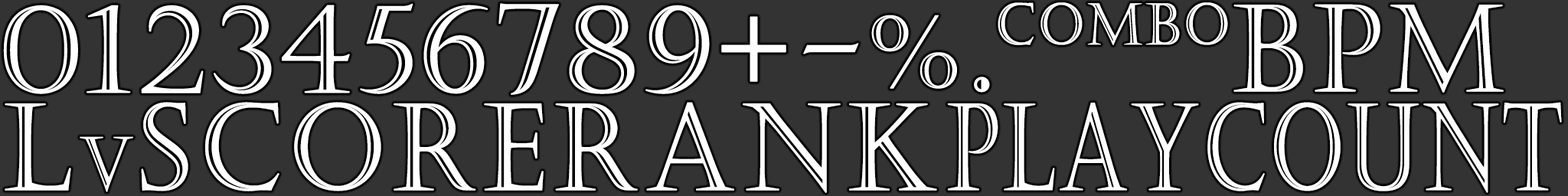
<style>
.page{position:relative;width:1568px;height:196px;background:#333333}
.page>*{position:absolute;margin:0}
.t1{font:57.4px "Castellar";letter-spacing:0.05em;color:#ffffff;font-weight:bold;scale:0.9 1}
.t2{font:120.2px "Castellar";letter-spacing:0.05em;color:#ffffff;font-weight:bold;scale:0.9 1}
.t3{font:120.2px "Castellar";letter-spacing:0.025em;color:#ffffff;font-weight:bold;scale:0.69 1}
.t4{font:73.5px "Castellar";letter-spacing:0.05em;color:#ffffff;font-weight:bold;scale:0.9 1}
</style>
<div class="page">
<p class="t1" style="left:998px;top:2px;width:230px;height:43px">Combo</p>
<p class="t2" style="left:1233px;top:4px;width:271px;height:89px">BPM</p>
<p class="t2" style="left:141px;top:102px;width:403px;height:89px">SCORE</p>
<p class="t2" style="left:555px;top:102px;width:382px;height:91px">RANK</p>
<p class="t3" style="left:947px;top:102px;width:615px;height:91px">PLAYCOUNT</p>
<p class="t2" style="left:5px;top:103px;width:128px;height:89px">L<span class="t4">v</span></p>
</div>
